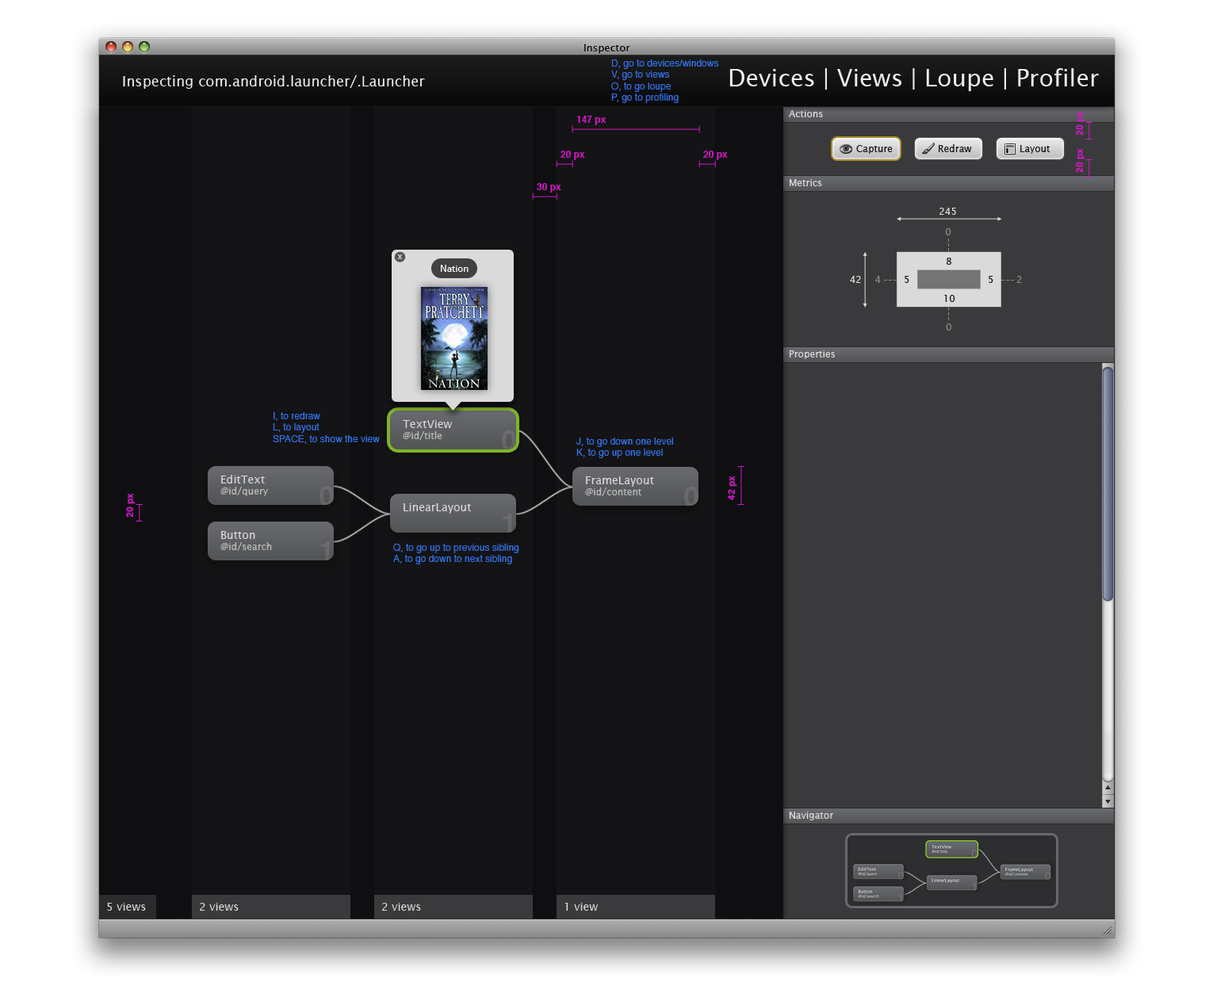
<style>
.page{position:relative;width:1209px;height:986px;background:#141416}
.page>*{position:absolute;margin:0}
.t1{font:9.5px "Helvetica";color:#3072eb}
.t2{font:14.3px "LucidaSans";color:#eeeeee}
.t3{font:23.8px "LucidaSans";color:#eeeeee}
.t4{font:9.5px "LucidaSans";color:#dadada}
.t5{font:9.5px "Helvetica-Bold";color:#d316c8}
.t6{font:9.5px "LucidaSans";color:#1b1c1f}
.t7{font:9.5px "LucidaSans";color:#8a8a8b}
.t8{font:9.5px "Helvetica";color:#dadada}
.t9{font:9.5px "DroidSans";color:#ffffff}
.t10{font:9.5px "LucidaSans";color:#babbbb}
.t11{font:11.1px "LucidaSans";color:#dadada}
.t12{font:28.5px "Helvetica-Bold";color:#68696a}
.t13{font:28.5px "Helvetica-Bold";color:#67686a}
</style>
<div class="page">
<p class="t1" style="left:611px;top:59px;width:108px;height:44px">D, go to devices/windows<br>V, go to views<br>O, to go loupe<br>P, go to profiling</p>
<p class="t2" style="left:123px;top:75px;width:302px;height:14px">Inspecting com.android.launcher/.Launcher</p>
<p class="t3" style="left:729px;top:68px;width:370px;height:23px">Devices | Views | Loupe | Profiler</p>
<p class="t4" style="left:789px;top:110px;width:34px;height:7px">Actions</p>
<p class="t5" style="left:1076px;top:111px;width:9px;height:25px;rotate:-90deg">20 px</p>
<p class="t5" style="left:576px;top:116px;width:30px;height:9px">147 px</p>
<p class="t6" style="left:856px;top:145px;width:37px;height:9px">Capture</p>
<p class="t6" style="left:939px;top:144px;width:33px;height:8px">Redraw</p>
<p class="t6" style="left:1020px;top:145px;width:30px;height:9px">Layout</p>
<p class="t5" style="left:1076px;top:148px;width:9px;height:25px;rotate:-90deg">20 px</p>
<p class="t5" style="left:561px;top:151px;width:24px;height:9px">20 px</p>
<p class="t5" style="left:703px;top:151px;width:25px;height:9px">20 px</p>
<p class="t5" style="left:537px;top:183px;width:24px;height:10px">30 px</p>
<p class="t4" style="left:790px;top:179px;width:32px;height:7px">Metrics</p>
<p class="t4" style="left:939px;top:208px;width:17px;height:7px">245</p>
<p class="t7" style="left:945px;top:228px;width:6px;height:7px">0</p>
<p class="t8" style="left:397px;top:254px;width:6px;height:5px">x</p>
<p class="t6" style="left:946px;top:258px;width:5px;height:7px">8</p>
<p class="t9" style="left:441px;top:265px;width:28px;height:7px">Nation</p>
<p class="t4" style="left:850px;top:276px;width:11px;height:7px">42</p>
<p class="t7" style="left:875px;top:276px;width:6px;height:7px">4</p>
<p class="t6" style="left:905px;top:276px;width:4px;height:7px">5</p>
<p class="t6" style="left:989px;top:276px;width:4px;height:7px">5</p>
<p class="t7" style="left:1016px;top:276px;width:6px;height:7px">2</p>
<p class="t6" style="left:944px;top:295px;width:11px;height:7px">10</p>
<p class="t7" style="left:946px;top:323px;width:5px;height:8px">0</p>
<p class="t4" style="left:790px;top:350px;width:45px;height:9px">Properties</p>
<p class="t1" style="left:273px;top:412px;width:107px;height:32px">I, to redraw<br>L, to layout<br>SPACE, to show the view</p>
<p class="t10" style="left:403px;top:420px;width:49px;height:20px"><span class="t11">TextView<br></span>@id/title</p>
<p class="t12" style="left:502px;top:430px;width:14px;height:20px">0</p>
<p class="t1" style="left:576px;top:438px;width:97px;height:20px">J, to go down one level<br>K, to go up one level</p>
<p class="t10" style="left:220px;top:475px;width:48px;height:21px"><span class="t11">EditText<br></span>@id/query</p>
<p class="t13" style="left:320px;top:486px;width:14px;height:20px">0</p>
<p class="t11" style="left:585px;top:476px;width:69px;height:20px">FrameLayout<br><span class="t10">@id/content</span></p>
<p class="t5" style="left:728px;top:476px;width:9px;height:24px;rotate:-90deg">42 px</p>
<p class="t5" style="left:126px;top:493px;width:10px;height:25px;rotate:-90deg">20 px</p>
<p class="t13" style="left:684px;top:487px;width:14px;height:20px">0</p>
<p class="t11" style="left:404px;top:503px;width:68px;height:11px">LinearLayout</p>
<p class="t12" style="left:503px;top:514px;width:9px;height:20px">1</p>
<p class="t10" style="left:220px;top:531px;width:52px;height:20px"><span class="t11">Button<br></span>@id/search</p>
<p class="t12" style="left:320px;top:541px;width:10px;height:20px">1</p>
<p class="t1" style="left:393px;top:544px;width:126px;height:20px">Q, to go up to previous sibling<br>A, to go down to next sibling</p>
<p class="t4" style="left:789px;top:812px;width:44px;height:9px">Navigator</p>
<p class="t11" style="left:107px;top:903px;width:39px;height:8px">5 views</p>
<p class="t11" style="left:200px;top:903px;width:39px;height:8px">2 views</p>
<p class="t11" style="left:382px;top:903px;width:39px;height:8px">2 views</p>
<p class="t11" style="left:564px;top:903px;width:34px;height:8px">1 view</p>
</div>
